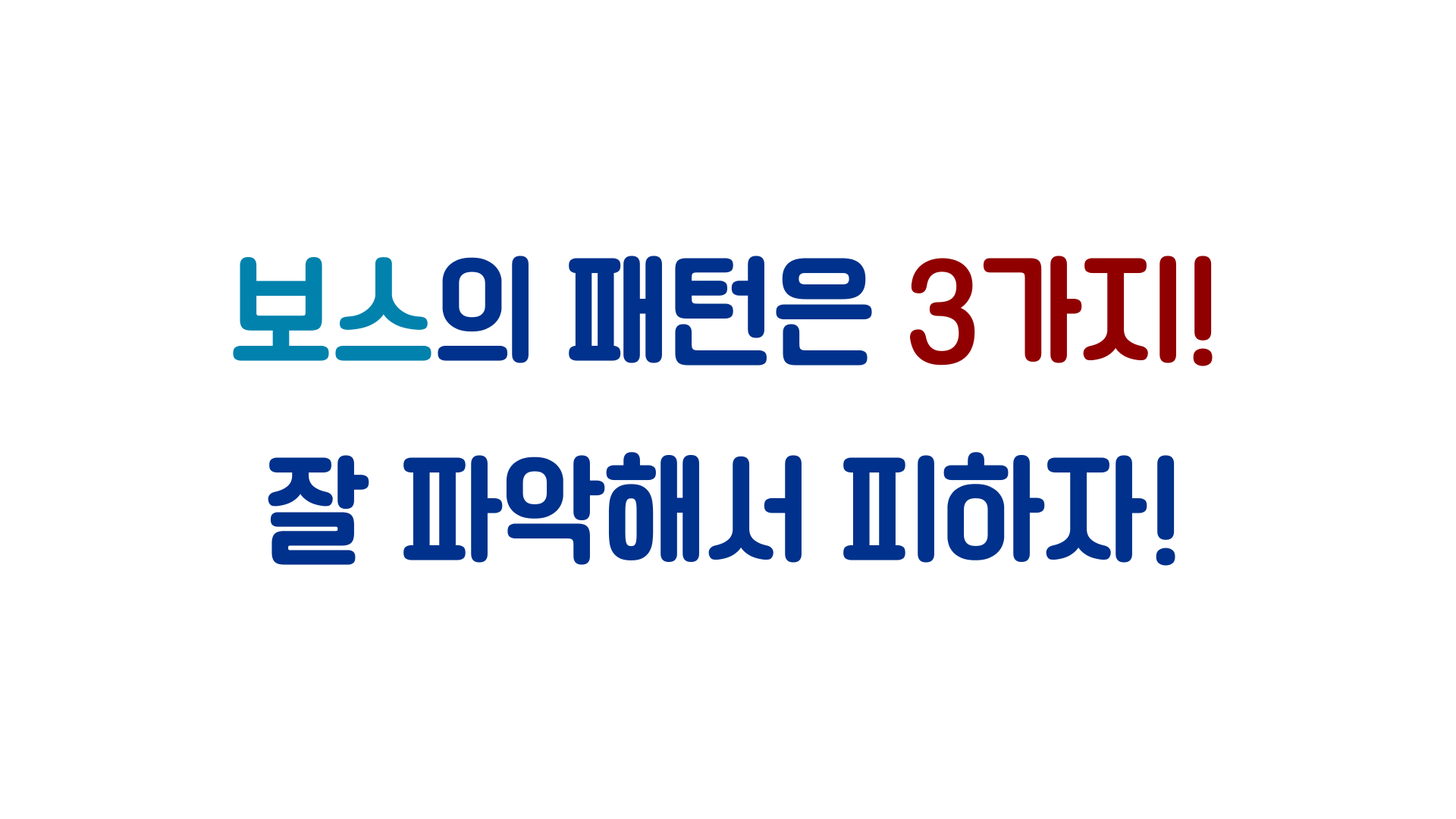
<style>
.page{position:relative;width:1456px;height:819px;background:#ffffff}
.page>*{position:absolute;margin:0}
.t1{font:113.7px "TTChungchunsidaeR";color:#00318c}
.t2{font:113.7px "TTChungchunsidaeR";color:#0082ad}
.t3{font:113.7px "TTChungchunsidaeR";color:#910000}
</style>
<div class="page">
<p class="t1" style="left:233px;top:256px;width:980px;height:310px;text-align:center"><span class="t2">보스</span>의 패턴은 <span class="t3">3가지!<br></span>잘 파악해서 피하자!</p>
</div>
